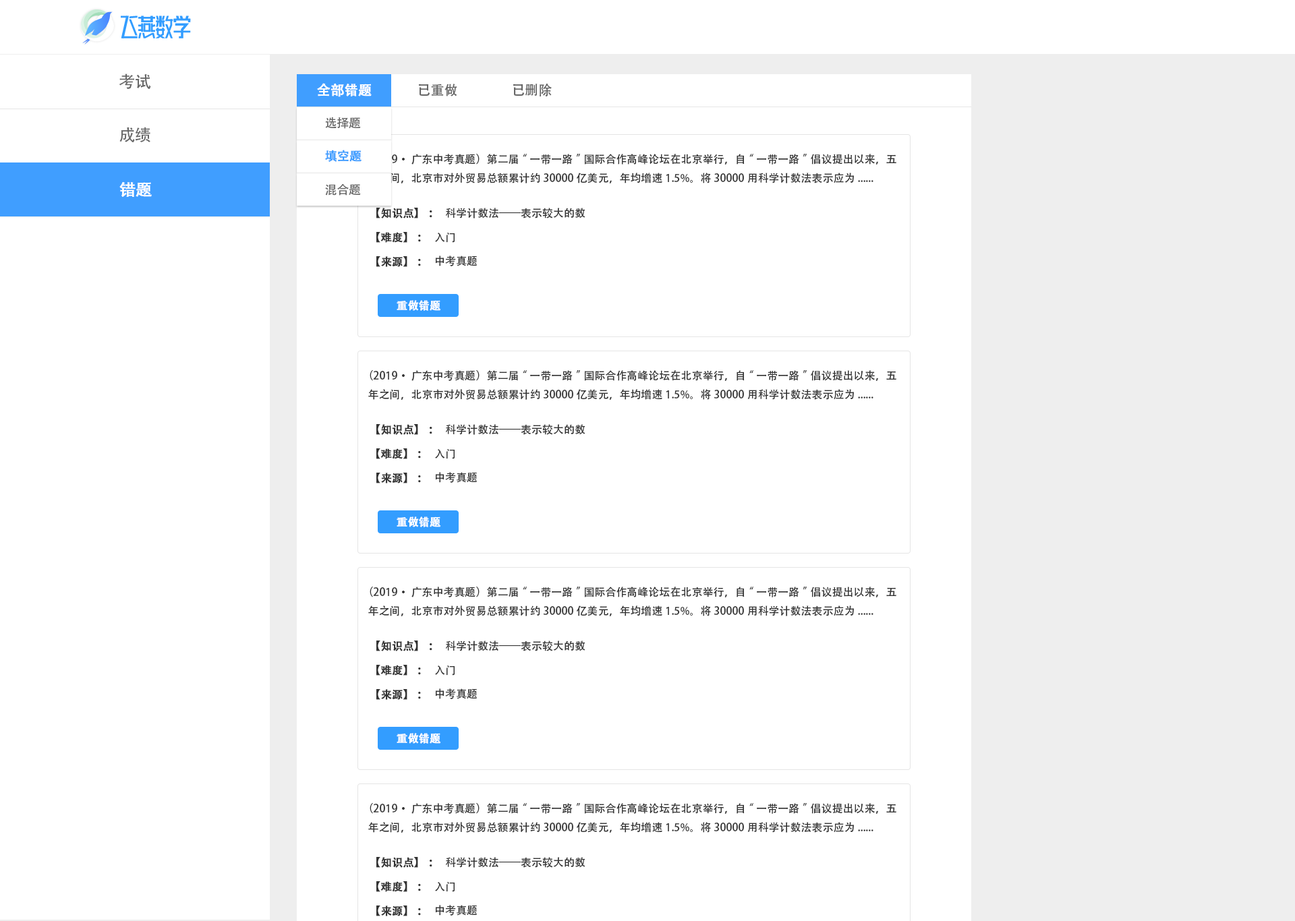
<style>
.page{position:relative;width:1295px;height:921px;background:#ffffff}
.page>*{position:absolute;margin:0}
.t1{font:16.2px "AdobeHeitiStd-Regular";color:#666666}
.t2{font:13.5px "AdobeHeitiStd-Regular";color:#ffffff;font-weight:bold}
.t3{font:13.5px "AdobeHeitiStd-Regular";color:#666666}
.t4{font:12.1px "AdobeHeitiStd-Regular";color:#666666}
.t5{font:12.1px "AdobeHeitiStd-Regular";color:#409eff;font-weight:bold}
.t6{font:10.8px "AdobeHeitiStd-Regular";color:#333333}
.t7{font:16.2px "AdobeHeitiStd-Regular";color:#ffffff;font-weight:bold}
.t8{font:10.8px "AdobeHeitiStd-Regular";color:#333333;font-weight:bold}
.t9{font:10.8px "AdobeHeitiStd-Regular";color:#ffffff;font-weight:bold}
</style>
<div class="page">
<p class="t1" style="left:119px;top:73px;width:32px;height:16px">考试</p>
<p class="t2" style="left:317px;top:83px;width:55px;height:14px">全部错题</p>
<p class="t3" style="left:419px;top:84px;width:38px;height:12px">已重做</p>
<p class="t3" style="left:513px;top:84px;width:39px;height:12px">已删除</p>
<p class="t4" style="left:325px;top:117px;width:36px;height:12px">选择题</p>
<p class="t1" style="left:119px;top:127px;width:31px;height:15px">成绩</p>
<p class="t5" style="left:325px;top:150px;width:36px;height:12px">填空题</p>
<p class="t6" style="left:368px;top:154px;width:528px;height:29px">（2019·广东中考真题）第二届“一带一路”国际合作高峰论坛在北京举行，自“一带一路”倡议提出以来，五年之间，北京市对外贸易总额累计约30000亿美元，年均增速1.5%。将30000用科学计数法表示应为......</p>
<p class="t7" style="left:119px;top:182px;width:33px;height:15px">错题</p>
<p class="t4" style="left:325px;top:183px;width:36px;height:13px">混合题</p>
<p class="t8" style="left:376px;top:208px;width:56px;height:10px">【知识点】：</p>
<p class="t6" style="left:446px;top:208px;width:139px;height:10px">科学计数法——表示较大的数</p>
<p class="t8" style="left:376px;top:232px;width:45px;height:11px">【难度】：</p>
<p class="t6" style="left:435px;top:233px;width:19px;height:10px">入门</p>
<p class="t8" style="left:376px;top:256px;width:45px;height:11px">【来源】：</p>
<p class="t6" style="left:435px;top:256px;width:42px;height:10px">中考真题</p>
<p class="t9" style="left:396px;top:300px;width:45px;height:11px">重做错题</p>
<p class="t6" style="left:368px;top:370px;width:528px;height:30px">（2019·广东中考真题）第二届“一带一路”国际合作高峰论坛在北京举行，自“一带一路”倡议提出以来，五年之间，北京市对外贸易总额累计约30000亿美元，年均增速1.5%。将30000用科学计数法表示应为......</p>
<p class="t8" style="left:376px;top:424px;width:56px;height:11px">【知识点】：</p>
<p class="t6" style="left:446px;top:424px;width:139px;height:11px">科学计数法——表示较大的数</p>
<p class="t8" style="left:376px;top:448px;width:45px;height:11px">【难度】：</p>
<p class="t6" style="left:435px;top:449px;width:19px;height:10px">入门</p>
<p class="t8" style="left:376px;top:473px;width:45px;height:10px">【来源】：</p>
<p class="t6" style="left:435px;top:472px;width:42px;height:11px">中考真题</p>
<p class="t9" style="left:396px;top:516px;width:45px;height:11px">重做错题</p>
<p class="t6" style="left:368px;top:587px;width:528px;height:29px">（2019·广东中考真题）第二届“一带一路”国际合作高峰论坛在北京举行，自“一带一路”倡议提出以来，五年之间，北京市对外贸易总额累计约30000亿美元，年均增速1.5%。将30000用科学计数法表示应为......</p>
<p class="t8" style="left:376px;top:641px;width:56px;height:10px">【知识点】：</p>
<p class="t6" style="left:446px;top:641px;width:139px;height:10px">科学计数法——表示较大的数</p>
<p class="t8" style="left:376px;top:665px;width:45px;height:11px">【难度】：</p>
<p class="t6" style="left:435px;top:666px;width:19px;height:10px">入门</p>
<p class="t8" style="left:376px;top:689px;width:45px;height:11px">【来源】：</p>
<p class="t6" style="left:435px;top:688px;width:42px;height:11px">中考真题</p>
<p class="t9" style="left:396px;top:733px;width:45px;height:11px">重做错题</p>
<p class="t6" style="left:368px;top:803px;width:528px;height:30px">（2019·广东中考真题）第二届“一带一路”国际合作高峰论坛在北京举行，自“一带一路”倡议提出以来，五年之间，北京市对外贸易总额累计约30000亿美元，年均增速1.5%。将30000用科学计数法表示应为......</p>
<p class="t8" style="left:376px;top:857px;width:56px;height:11px">【知识点】：</p>
<p class="t6" style="left:446px;top:857px;width:139px;height:11px">科学计数法——表示较大的数</p>
<p class="t8" style="left:376px;top:881px;width:45px;height:11px">【难度】：</p>
<p class="t6" style="left:435px;top:882px;width:19px;height:10px">入门</p>
<p class="t8" style="left:376px;top:906px;width:45px;height:10px">【来源】：</p>
<p class="t6" style="left:435px;top:905px;width:42px;height:11px">中考真题</p>
</div>
